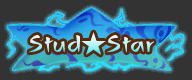
<style>
.page{position:relative;width:192px;height:80px;background:#333333}
.page>*{position:absolute;margin:0}
.t1{font:24px "FOT-PopFury-Std-B-vL2";scale:1.05 1}
.t2{font:24px "EmojiOneColor";scale:1.05 1}
</style>
<div class="page">
<p class="t1" style="left:29px;top:32px;width:125px;height:23px">Stud<span class="t2">⭐</span>Star</p>
</div>
